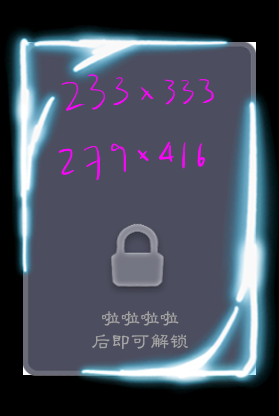
<style>
.page{position:relative;width:279px;height:416px;background:#4c4d5e}
.page>*{position:absolute;margin:0}
.t1{font:32.8px/5px "FZLBJW--GB1-0";letter-spacing:0.023em;color:#a7a7a7}
</style>
<div class="page">
<p class="t1" style="left:92px;top:311px;width:96px;height:39px;text-align:center">啦啦啦啦<br>后即可解锁</p>
</div>
